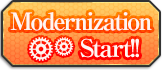
<style>
.page{position:relative;width:162px;height:70px}
.page>*{position:absolute;margin:0}
.t1{font:24px "RyuminPro-ExBold";letter-spacing:-0.08em;color:#fff6f2}
</style>
<div class="page">
<p class="t1" style="left:10px;top:12px;width:142px;height:19px">Modernization</p>
<p class="t1" style="left:80px;top:38px;width:59px;height:20px">Start!!</p>
</div>
